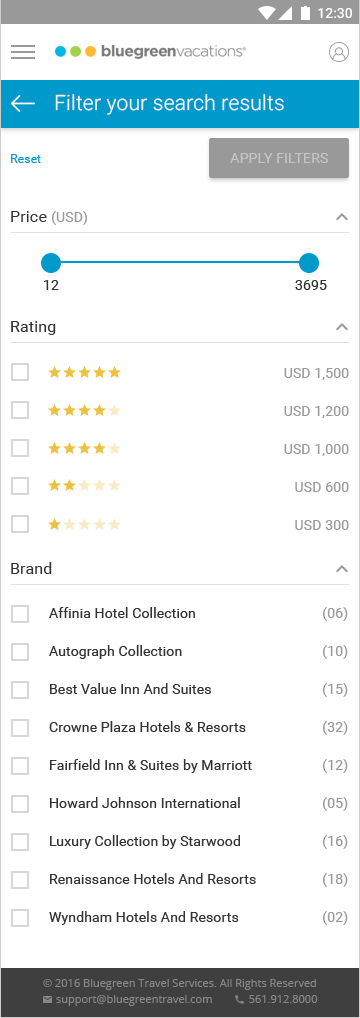
<style>
.page{position:relative;width:360px;height:1018px;background:#ffffff}
.page>*{position:absolute;margin:0}
.t1{font:21px "Roboto-Light";letter-spacing:0.01em;color:#ffffff}
.t2{font:12px "Roboto-Regular";letter-spacing:0.01em;color:#0099cc}
.t3{font:14px "Roboto-Regular";letter-spacing:0.01em;color:#c4c4c4;text-transform:uppercase}
.t4{font:16px "Roboto-Regular";letter-spacing:0.01em;color:#333333}
.t5{font:14px "Roboto-Regular";letter-spacing:0.01em;color:#999999}
.t6{font:14px "Roboto-Regular";letter-spacing:0.01em;color:#333333}
.t7{font:14px/38px "Roboto-Regular";letter-spacing:0.01em;color:#999999}
.t8{font:14px/38px "Roboto-Regular";letter-spacing:0.01em;color:#333333}
</style>
<div class="page">
<p class="t1" style="left:55px;top:94px;width:229px;height:21px">Filter your search results</p>
<p class="t2" style="left:11px;top:154px;width:30px;height:9px">Reset</p>
<p class="t3" style="left:230px;top:153px;width:98px;height:10px">apply filters</p>
<p class="t4" style="left:11px;top:211px;width:76px;height:14px">Price <span class="t5">(USD)</span></p>
<p class="t6" style="left:44px;top:280px;width:15px;height:10px">12</p>
<p class="t6" style="left:295px;top:280px;width:32px;height:10px">3695</p>
<p class="t4" style="left:11px;top:321px;width:45px;height:14px">Rating</p>
<p class="t7" style="left:284px;top:368px;width:65px;height:162px;text-align:right">USD 1,500<br>USD 1,200<br>USD 1,000<br>USD 600<br>USD 300</p>
<p class="t4" style="left:11px;top:562px;width:41px;height:12px">Brand</p>
<p class="t8" style="left:49px;top:607px;width:207px;height:318px">Affinia Hotel Collection<br>Autograph Collection<br>Best Value Inn And Suites<br>Crowne Plaza Hotels &amp; Resorts<br>Fairfield Inn &amp; Suites by Marriott<br>Howard Johnson International<br>Luxury Collection by Starwood<br>Renaissance Hotels And Resorts<br>Wyndham Hotels And Resorts</p>
<p class="t7" style="left:323px;top:607px;width:25px;height:318px;text-align:right">(06)<br>(10)<br>(15)<br>(32)<br>(12)<br>(05)<br>(16)<br>(18)<br>(02)</p>
</div>
